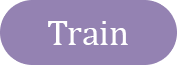
<style>
.page{position:relative;width:177px;height:65px;background:#9482b2}
.page>*{position:absolute;margin:0}
.t1{font:36px "Cambria";color:#ffffff}
</style>
<div class="page">
<p class="t1" style="left:48px;top:21px;width:80px;height:24px">Train</p>
</div>
